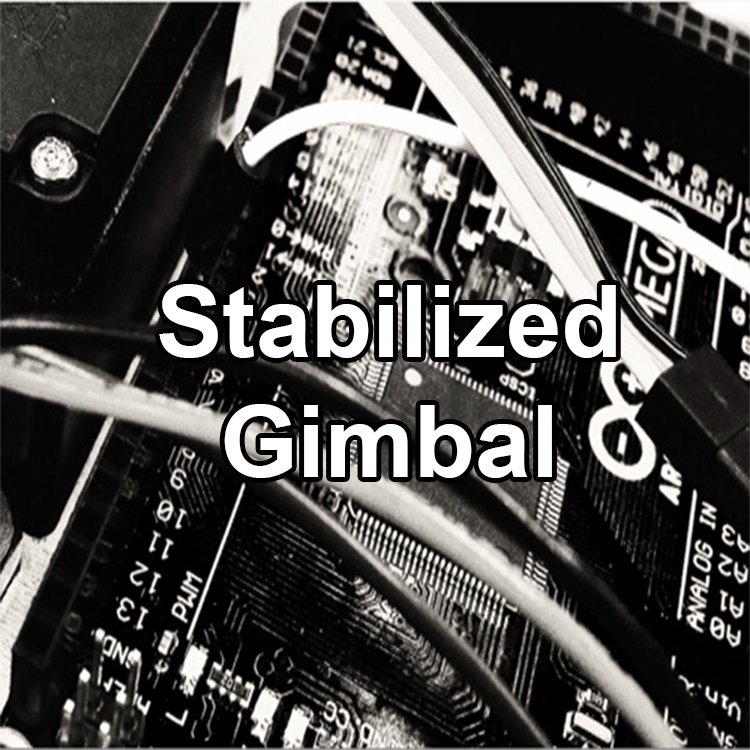
<style>
.page{position:relative;width:750px;height:750px}
.page>*{position:absolute;margin:0}
.t1{font:100px "Arial-BoldMT";color:#ffffff}
</style>
<div class="page">
<p class="t1" style="left:159px;top:284px;width:457px;height:194px;text-align:center">Stabilized Gimbal</p>
</div>
